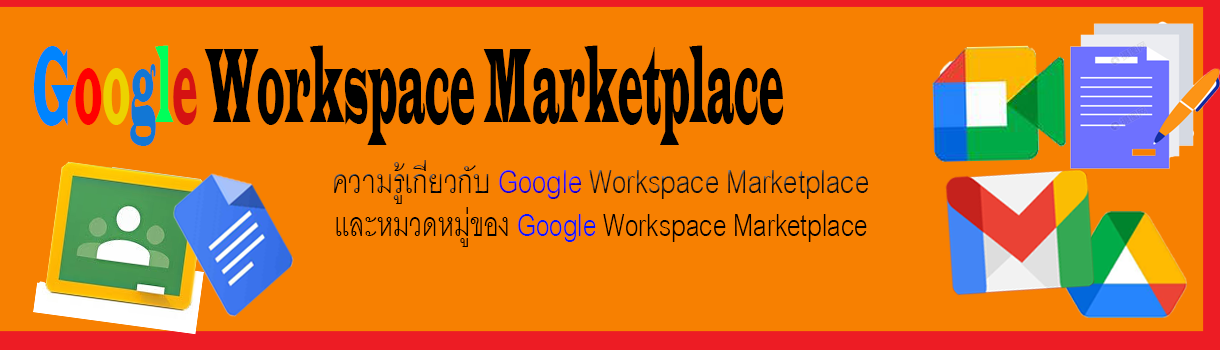
<style>
.page{position:relative;width:1220px;height:350px;background:#f78001}
.page>*{position:absolute;margin:0}
.t1{font:110px "LatinWide";color:#000000;scale:0.26 1}
.t2{font:110px "LatinWide";color:#0084fe;scale:0.26 1}
.t3{font:110px "LatinWide";color:#ff0000;scale:0.26 1}
.t4{font:110px "LatinWide";color:#ecd300;scale:0.26 1}
.t5{font:110px "LatinWide";color:#1277d5;scale:0.26 1}
.t6{font:110px "LatinWide";color:#00ff5a;scale:0.26 1}
.t7{font:110px "LatinWide";color:#d51212;scale:0.26 1}
.t8{font:48.3px "CordiaNew";color:#101010;scale:0.81 1}
.t9{font:48.3px "CordiaNew";color:#000000;scale:0.81 1}
.t10{font:48.3px "CordiaNew";color:#2401f7;scale:0.81 1}
.t11{font:46.6px "CordiaNew";color:#000000;scale:0.8 1}
.t12{font:46.6px "CordiaNew";color:#0915ff;scale:0.8 1}
</style>
<div class="page">
<p class="t1" style="left:33px;top:45px;width:751px;height:101px"><span class="t2">G</span><span class="t3">o</span><span class="t4">o</span><span class="t5">g</span><span class="t6">l</span><span class="t7">e </span>Workspace Marketplace</p>
<p class="t8" style="left:334px;top:160px;width:535px;height:44px"><span class="t9">ความรู้เกี่ยวกับ</span><span class="t10"> Google </span>Workspace Marketplace</p>
<p class="t11" style="left:336px;top:207px;width:531px;height:40px">เเละหมวดหมู่ของ <span class="t12">Google </span>Workspace Marketplace</p>
</div>
